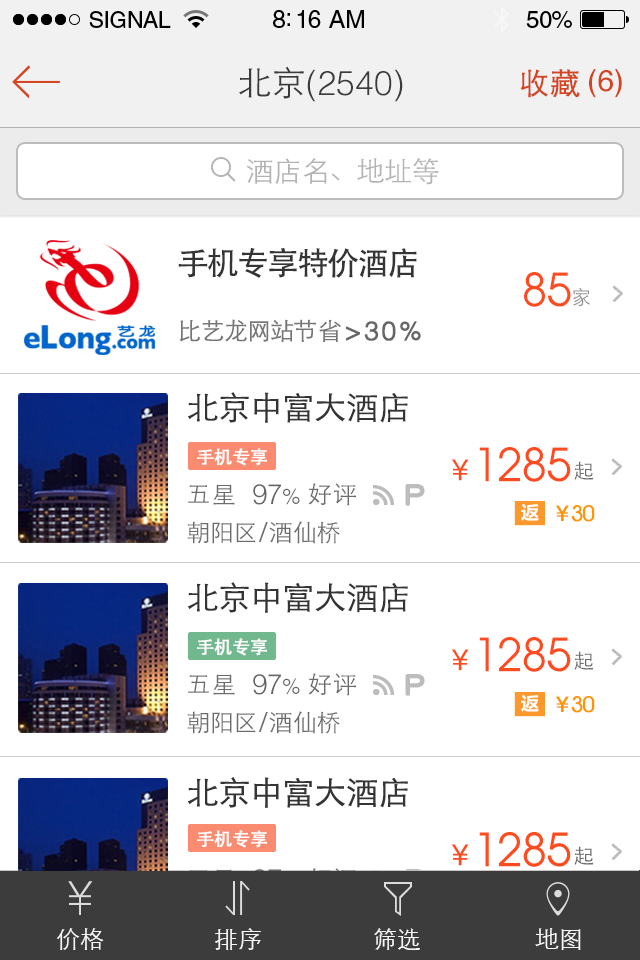
<style>
.page{position:relative;width:640px;height:960px;background:#ffffff}
.page>*{position:absolute;margin:0}
.t1{font:34px "Helvetica-Light";color:#3c3c3c}
.t2{font:34px "STHeitiSC-Light";color:#3c3c3c}
.t3{font:30px "STHeitiSC-Light";color:#d24624;font-weight:bold}
.t4{font:30px "Helvetica";color:#d24624}
.t5{font:28px "STHeitiSC-Light";letter-spacing:-0.01em;color:#b3b3b3}
.t6{font:32px "STHeitiSC-Medium";letter-spacing:-0.06em;color:#343434}
.t7{font:46px "AtillaNormal";color:#fe4b20}
.t8{font:20px "STHeitiSC-Light";letter-spacing:0.1em;color:#8e8e8e}
.t9{font:24px "STHeitiSC-Light";letter-spacing:-0.04em;color:#6c6c6c}
.t10{font:24px "STHeitiSC-Light";letter-spacing:0.04em;color:#6c6c6c}
.t11{font:26px "Helvetica-Light";letter-spacing:0.08em;color:#666666;font-weight:bold}
.t12{font:32px "STHeitiSC-Light";letter-spacing:-0.03em;color:#343434;font-weight:bold}
.t13{font:18px "STHeitiSC-Medium";letter-spacing:-0.03em;color:#ffffff;font-weight:bold}
.t14{font:30px "STHeitiSC-Medium";color:#fe4b20}
.t15{font:20px "STHeitiSC-Light";letter-spacing:-0.04em;color:#6c6c6c}
.t16{font:24px "STHeitiSC-Light";letter-spacing:0.05em;color:#6c6c6c}
.t17{font:28px "Helvetica-Light";letter-spacing:-0.03em;color:#666666}
.t18{font:22px "Helvetica-Light";letter-spacing:-0.03em;color:#666666}
.t19{font:28px "WalkwayUltraBold";letter-spacing:0.05em;color:#bcbcbc;font-weight:bold}
.t20{font:18px "MicrosoftYaHei";letter-spacing:0.1em;color:#ffffff}
.t21{font:22px "STHeitiSC-Medium";letter-spacing:-0.04em;color:#ff9600;font-weight:bold}
.t22{font:22px "AtillaNormal";letter-spacing:-0.04em;color:#ff9600;font-weight:bold}
.t23{font:24px "STHeitiSC-Light";color:#6c6c6c}
.t24{font:24px "STHeitiSC-Light";color:#f5f5f5}
</style>
<div class="page">
<p class="t1" style="left:239px;top:66px;width:164px;height:36px"><span class="t2">北京</span>(2540)</p>
<p class="t3" style="left:520px;top:69px;width:60px;height:29px">收藏</p>
<p class="t4" style="left:589px;top:69px;width:33px;height:29px">(6)</p>
<p class="t5" style="left:246px;top:158px;width:193px;height:27px">酒店名、地址等</p>
<p class="t6" style="left:178px;top:247px;width:239px;height:31px">手机专享特价酒店</p>
<p class="t7" style="left:524px;top:272px;width:47px;height:35px">85</p>
<p class="t8" style="left:573px;top:287px;width:17px;height:20px">家</p>
<p class="t9" style="left:179px;top:319px;width:162px;height:23px">比艺龙网站<span class="t10">节省</span></p>
<p class="t11" style="left:346px;top:321px;width:75px;height:20px">&gt;30%</p>
<p class="t12" style="left:188px;top:392px;width:220px;height:31px">北京中富大酒店</p>
<p class="t13" style="left:197px;top:448px;width:70px;height:18px">手机专享</p>
<p class="t7" style="left:479px;top:447px;width:92px;height:35px">1285</p>
<p class="t14" style="left:451px;top:459px;width:18px;height:22px">￥</p>
<p class="t15" style="left:574px;top:461px;width:20px;height:19px">起</p>
<p class="t16" style="left:188px;top:484px;width:47px;height:21px">五星</p>
<p class="t17" style="left:253px;top:484px;width:47px;height:21px">97<span class="t18">%</span></p>
<p class="t16" style="left:308px;top:483px;width:48px;height:23px">好评</p>
<p class="t19" style="left:406px;top:485px;width:18px;height:20px">P</p>
<p class="t20" style="left:521px;top:503px;width:18px;height:18px">返</p>
<p class="t21" style="left:556px;top:505px;width:13px;height:16px">￥</p>
<p class="t22" style="left:571px;top:505px;width:24px;height:17px">30</p>
<p class="t23" style="left:187px;top:521px;width:153px;height:23px">朝阳区/酒仙桥</p>
<p class="t12" style="left:188px;top:582px;width:220px;height:31px">北京中富大酒店</p>
<p class="t13" style="left:197px;top:638px;width:70px;height:18px">手机专享</p>
<p class="t7" style="left:479px;top:637px;width:92px;height:35px">1285</p>
<p class="t14" style="left:451px;top:649px;width:18px;height:22px">￥</p>
<p class="t15" style="left:574px;top:651px;width:20px;height:19px">起</p>
<p class="t16" style="left:188px;top:674px;width:47px;height:21px">五星</p>
<p class="t17" style="left:253px;top:674px;width:47px;height:21px">97<span class="t18">%</span></p>
<p class="t16" style="left:308px;top:673px;width:48px;height:23px">好评</p>
<p class="t19" style="left:406px;top:675px;width:18px;height:20px">P</p>
<p class="t20" style="left:521px;top:694px;width:18px;height:18px">返</p>
<p class="t21" style="left:556px;top:696px;width:13px;height:16px">￥</p>
<p class="t22" style="left:571px;top:696px;width:24px;height:17px">30</p>
<p class="t23" style="left:187px;top:711px;width:153px;height:23px">朝阳区/酒仙桥</p>
<p class="t13" style="left:197px;top:830px;width:70px;height:18px">手机专享</p>
<p class="t24" style="left:56px;top:928px;width:48px;height:22px">价格</p>
<p class="t24" style="left:215px;top:928px;width:46px;height:22px">排序</p>
<p class="t24" style="left:374px;top:928px;width:46px;height:22px">筛选</p>
<p class="t24" style="left:535px;top:928px;width:46px;height:22px">地图</p>
</div>
